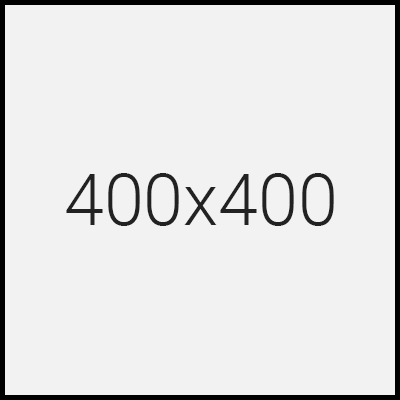
<style>
.page{position:relative;width:400px;height:400px;background:#f2f2f2}
.page>*{position:absolute;margin:0}
.t1{font:72px "Roboto-Light";color:#222222}
</style>
<div class="page">
<p class="t1" style="left:66px;top:173px;width:268px;height:53px">400x400</p>
</div>
